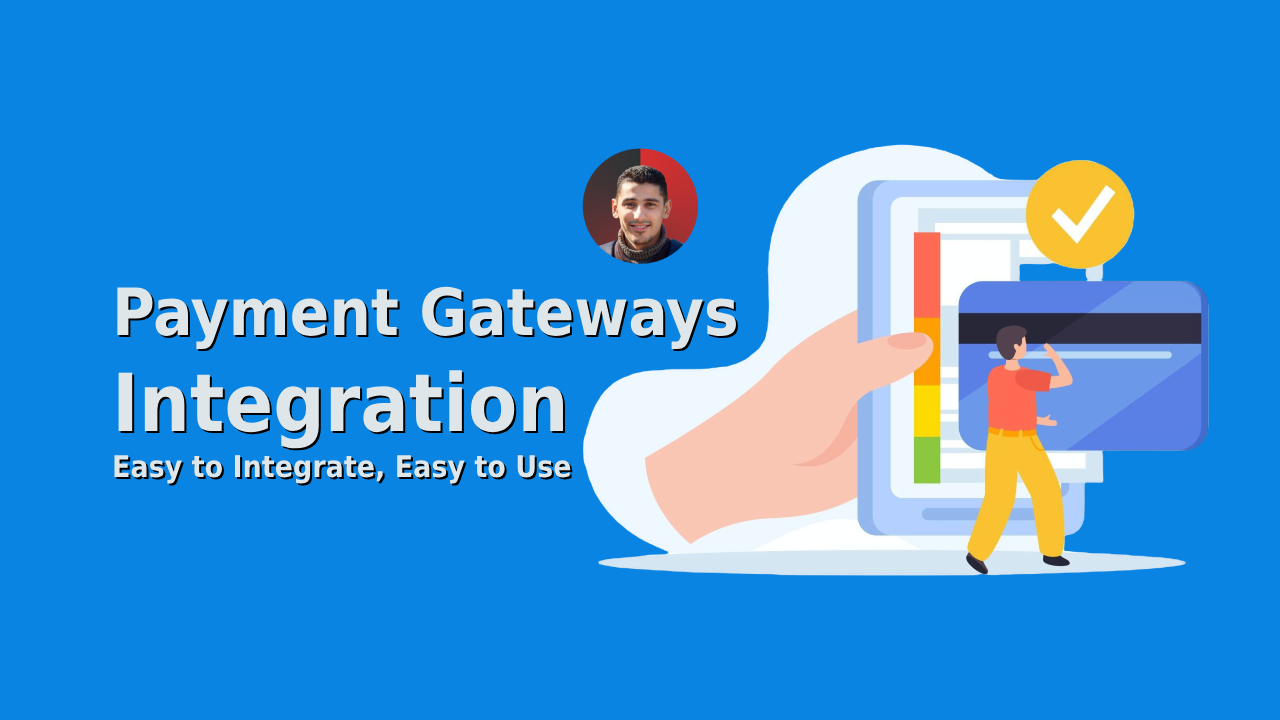
<style>
.page{position:relative;width:1280px;height:720px;background:#0984e3}
.page>*{position:absolute;margin:0}
.t1{font:30px "DejaVuSansCondensed-Bold";color:#dfe6e9}
.t2{font:65px "DejaVuSansCondensed-Bold";color:#dfe6e9}
.t3{font:80px "DejaVuSansCondensed-Bold";color:#dfe6e9}
</style>
<div class="page">
<p class="t1" style="left:114px;top:286px;width:622px;height:198px"><span class="t2">Payment Gateways </span><span class="t3">Integration<br></span>Easy to Integrate, Easy to Use</p>
</div>
